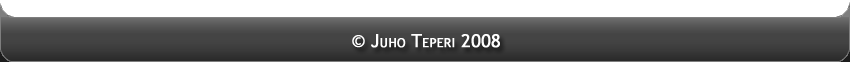
<style>
.page{position:relative;width:850px;height:62px;background:#ffffff}
.page>*{position:absolute;margin:0}
.t1{font:18px "TrebuchetMS";color:#ffffff;font-variant:small-caps;font-weight:bold}
</style>
<div class="page">
<p class="t1" style="left:352px;top:34px;width:148px;height:14px">© Juho Teperi 2008</p>
</div>
